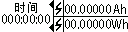
<style>
.page{position:relative;width:128px;height:32px;background:#ffffff}
.page>*{position:absolute;margin:0}
.t1{font:12px "AdobeHeitiStd-Regular";color:#000500}
</style>
<div class="page">
<p class="t1" style="left:15px;top:2px;width:22px;height:11px">时间</p>
<p class="t1" style="left:65px;top:4px;width:46px;height:10px">00.00000</p>
<p class="t1" style="left:113px;top:4px;width:13px;height:10px">Ah</p>
<p class="t1" style="left:2px;top:14px;width:48px;height:10px">000:00:00</p>
<p class="t1" style="left:65px;top:19px;width:46px;height:10px">00.00000</p>
<p class="t1" style="left:111px;top:19px;width:17px;height:10px">Wh</p>
</div>
